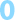
<style>
.page{position:relative;width:15px;height:20px;background:#8dd9ff}
.page>*{position:absolute;margin:0}
.t1{font:30px "MyriadPro-Bold";color:#8dd9ff}
</style>
<div class="page">
<p class="t1" style="left:0px;top:0px;width:15px;height:20px">0</p>
</div>
